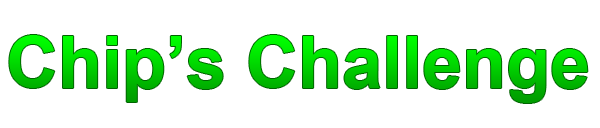
<style>
.page{position:relative;width:600px;height:128px;background:#ffffff}
.page>*{position:absolute;margin:0}
.t1{font:72px "Arial-BoldMT"}
</style>
<div class="page">
<p class="t1" style="left:9px;top:35px;width:579px;height:68px">Chip’s Challenge</p>
</div>
